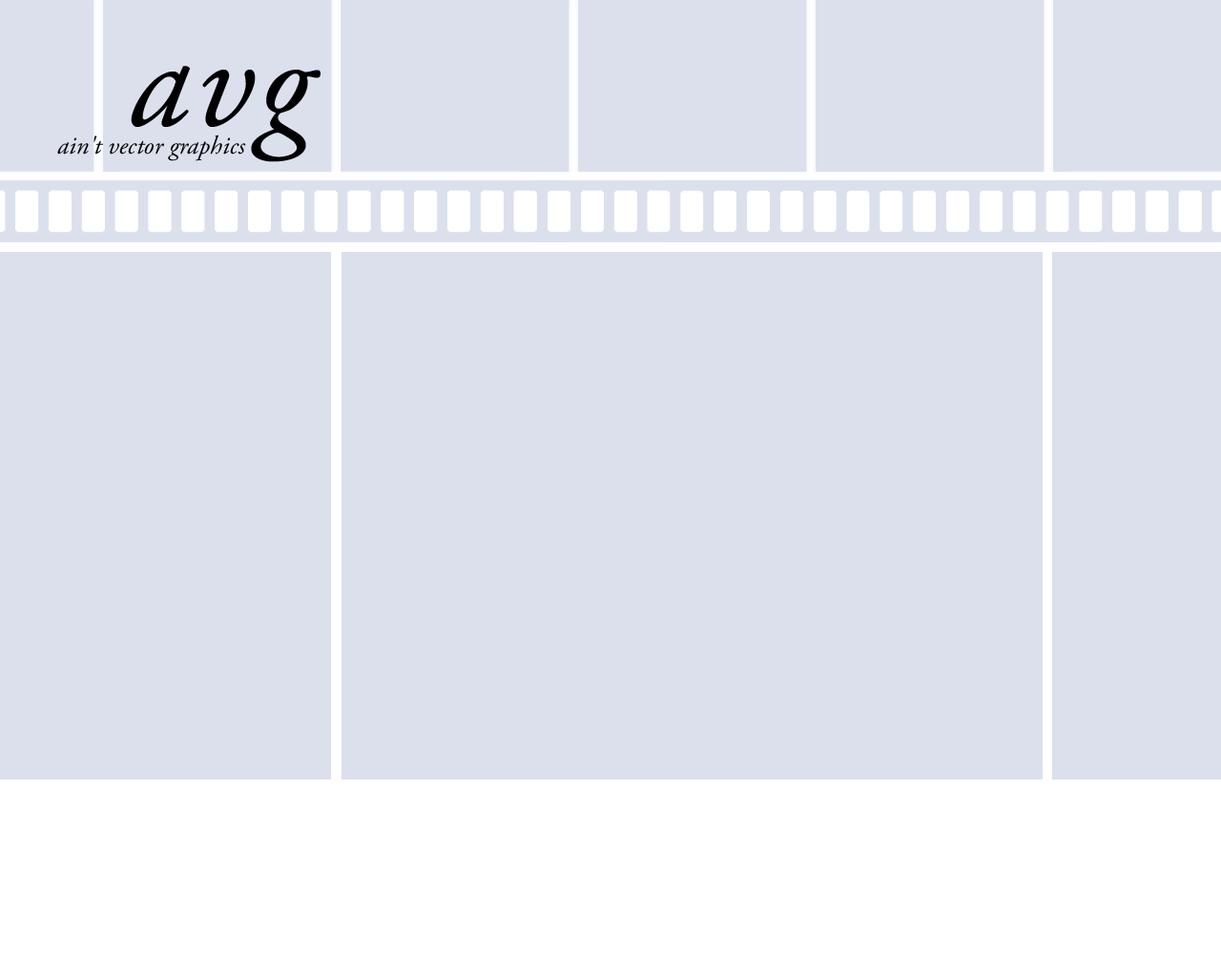
<style>
.page{position:relative;width:1221px;height:977px;background:#dce0ed}
.page>*{position:absolute;margin:0}
.t1{font:135.4px "AGaramondPro-Italic";letter-spacing:0.045em;color:#000000}
.t2{font:25.7px "AGaramondPro-Italic";color:#000000}
</style>
<div class="page">
<p class="t1" style="left:131px;top:66px;width:189px;height:96px">avg</p>
<p class="t2" style="left:57px;top:134px;width:189px;height:27px">ain't vector graphics</p>
</div>
